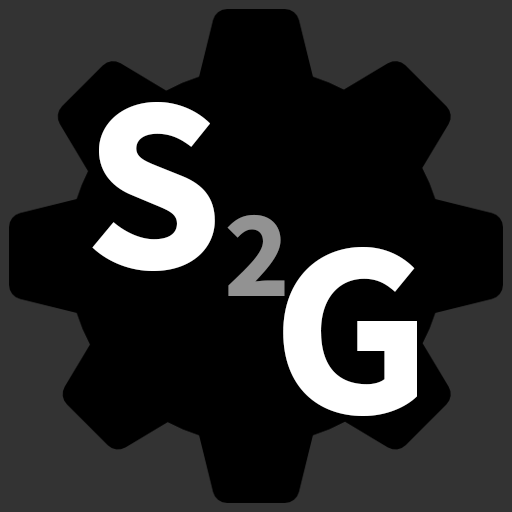
<style>
.page{position:relative;width:512px;height:512px;background:#000000}
.page>*{position:absolute;margin:0}
.t1{font:250px "SourceSansPro-Bold";color:#ffffff}
.t2{font:125px "SourceSansPro-Bold";color:#929292}
</style>
<div class="page">
<p class="t1" style="left:92px;top:102px;width:123px;height:169px">S</p>
<p class="t2" style="left:227px;top:214px;width:58px;height:82px">2</p>
<p class="t1" style="left:283px;top:247px;width:134px;height:169px">G</p>
</div>
